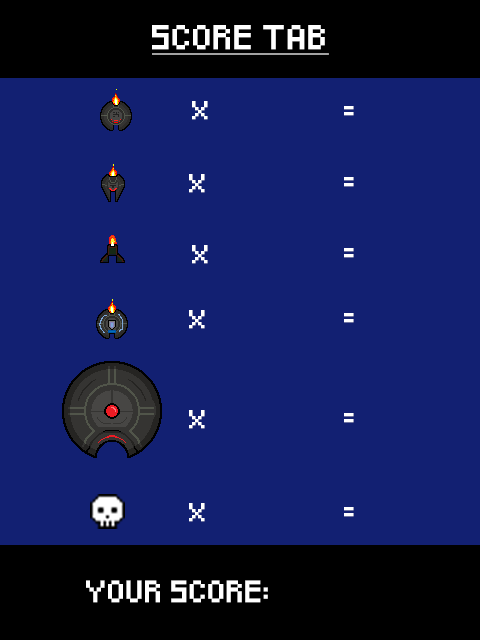
<style>
.page{position:relative;width:480px;height:640px;background:#122072}
.page>*{position:absolute;margin:0}
.t1{font:20px "Pixeled";color:#ffffff;font-weight:bold;text-decoration:underline}
.t2{font:15px "Pixeled";color:#ffffff;font-weight:bold}
.t3{font:18px "Pixeled";color:#ffffff;font-weight:bold}
</style>
<div class="page">
<p class="t1" style="left:152px;top:25px;width:177px;height:30px">SCORE TAB</p>
<p class="t2" style="left:192px;top:101px;width:16px;height:19px">X</p>
<p class="t2" style="left:344px;top:106px;width:10px;height:10px">=</p>
<p class="t2" style="left:189px;top:174px;width:16px;height:19px">X</p>
<p class="t2" style="left:344px;top:177px;width:10px;height:10px">=</p>
<p class="t2" style="left:192px;top:245px;width:16px;height:19px">X</p>
<p class="t2" style="left:344px;top:248px;width:10px;height:10px">=</p>
<p class="t2" style="left:189px;top:310px;width:16px;height:19px">X</p>
<p class="t2" style="left:344px;top:313px;width:10px;height:10px">=</p>
<p class="t2" style="left:189px;top:410px;width:16px;height:19px">X</p>
<p class="t2" style="left:344px;top:413px;width:10px;height:10px">=</p>
<p class="t2" style="left:189px;top:503px;width:16px;height:19px">X</p>
<p class="t2" style="left:344px;top:507px;width:10px;height:10px">=</p>
<p class="t3" style="left:86px;top:580px;width:182px;height:23px">YOUR SCORE:</p>
</div>
